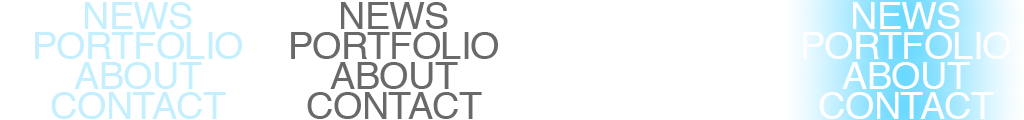
<style>
.page{position:relative;width:1024px;height:120px;background:#ffffff}
.page>*{position:absolute;margin:0}
.t1{font:37.5px "Helvetica";letter-spacing:-0.02em;color:#c3effe}
.t2{font:37.5px "Helvetica";letter-spacing:-0.02em;color:#696969}
.t3{font:37.5px "Helvetica";letter-spacing:-0.02em;color:#ffffff}
.t4{font:37.5px "Helvetica";letter-spacing:-0.02em;color:#fefefe}
</style>
<div class="page">
<p class="t1" style="left:85px;top:2px;width:107px;height:27px">NEWS</p>
<p class="t2" style="left:341px;top:2px;width:107px;height:27px">NEWS</p>
<p class="t3" style="left:853px;top:2px;width:107px;height:27px">NEWS</p>
<p class="t1" style="left:35px;top:32px;width:207px;height:27px">PORTFOLIO</p>
<p class="t2" style="left:291px;top:32px;width:207px;height:27px">PORTFOLIO</p>
<p class="t4" style="left:803px;top:32px;width:207px;height:27px">PORTFOLIO</p>
<p class="t1" style="left:74px;top:62px;width:128px;height:27px">ABOUT</p>
<p class="t2" style="left:330px;top:62px;width:128px;height:27px">ABOUT</p>
<p class="t3" style="left:842px;top:62px;width:128px;height:27px">ABOUT</p>
<p class="t1" style="left:51px;top:92px;width:175px;height:27px">CONTACT</p>
<p class="t2" style="left:307px;top:92px;width:175px;height:27px">CONTACT</p>
<p class="t3" style="left:819px;top:92px;width:175px;height:27px">CONTACT</p>
</div>
